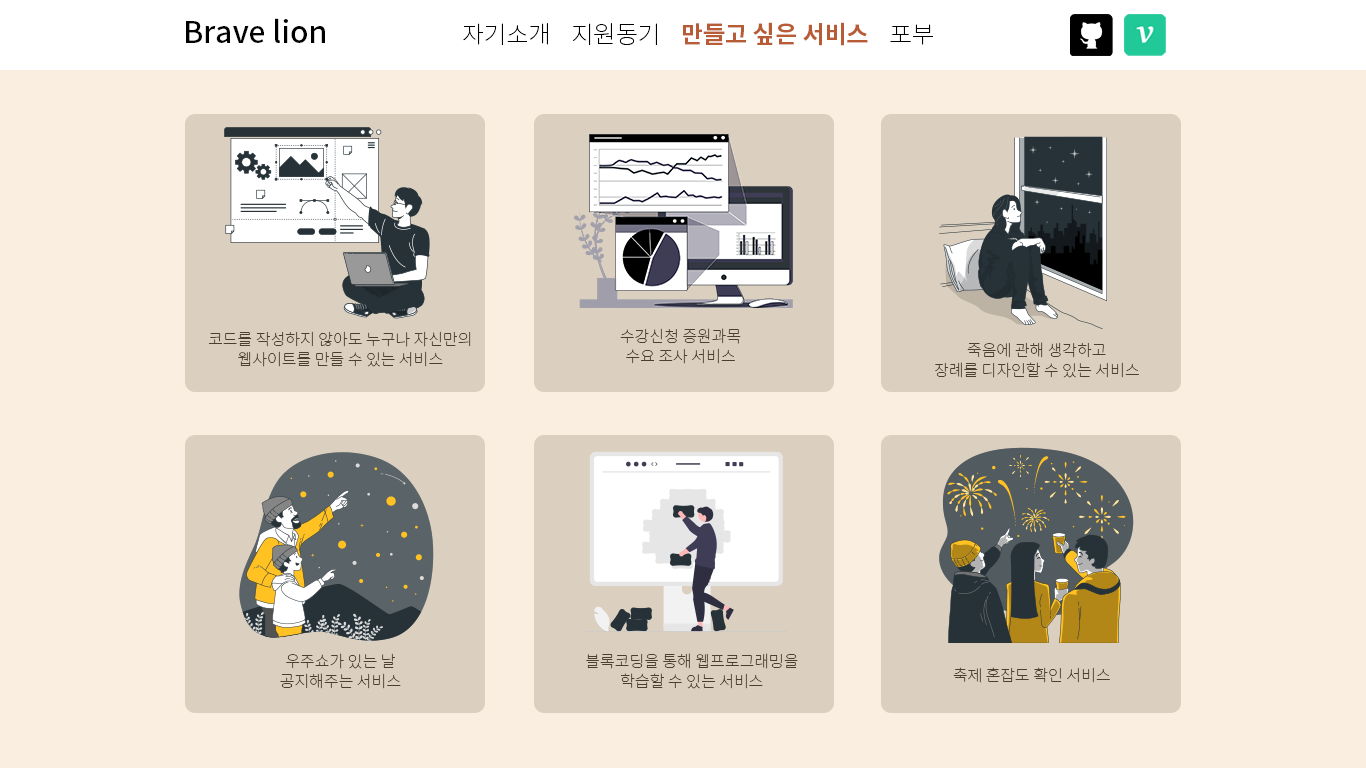
<style>
.page{position:relative;width:1366px;height:768px;background:#faeee0}
.page>*{position:absolute;margin:0}
.t1{font:30px "NotoSansKR-Medium";color:#000000}
.t2{font:24px "NotoSansKR-Thin";color:#000000}
.t3{font:24px "NotoSansKR-Bold";color:#b85c38}
.t4{font:16px/20px "NotoSansKR-Thin";color:#4a3f32}
.t5{font:16px "NotoSansKR-Thin";color:#4a3f32}
</style>
<div class="page">
<p class="t1" style="left:186px;top:18px;width:139px;height:25px">Brave lion</p>
<p class="t2" style="left:463px;top:22px;width:470px;height:24px">자기소개    지원동기    <span class="t3">만들고 싶은 서비스</span>    포부</p>
<p class="t4" style="left:620px;top:328px;width:121px;height:36px;text-align:justify">수강신청 증원과목<br>수요 조사 서비스</p>
<p class="t4" style="left:209px;top:331px;width:262px;height:36px;text-align:justify">코드를 작성하지 않아도 누구나 자신만의<br>웹사이트를 만들 수 있는 서비스</p>
<p class="t4" style="left:935px;top:342px;width:204px;height:36px;text-align:justify">죽음에 관해 생각하고<br>장례를 디자인할 수 있는 서비스</p>
<p class="t4" style="left:280px;top:653px;width:121px;height:36px;text-align:justify">우주쇼가 있는 날<br>공지해주는 서비스</p>
<p class="t4" style="left:586px;top:653px;width:212px;height:36px;text-align:justify">블록코딩을 통해 웹프로그래밍을<br>학습할 수 있는 서비스</p>
<p class="t5" style="left:953px;top:667px;width:157px;height:16px">축제 혼잡도 확인 서비스</p>
</div>
